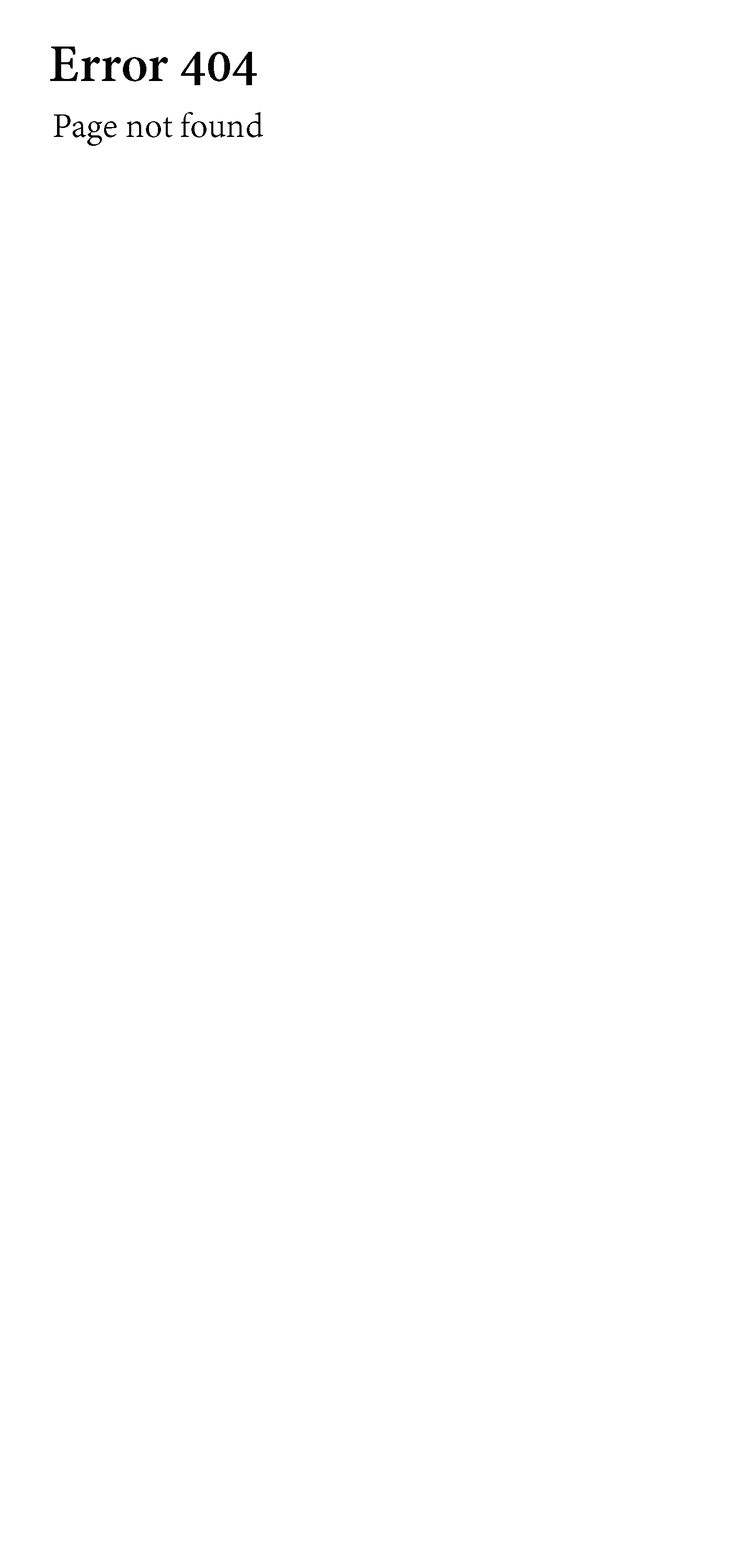
<style>
.page{position:relative;width:732px;height:1568px;background:#ffffff}
.page>*{position:absolute;margin:0}
.t1{font:57.5px "AdobeGurmukhi-Bold";color:#020202}
.t2{font:37.6px "AdobeGurmukhi-Regular";color:#020202}
</style>
<div class="page">
<p class="t1" style="left:50px;top:47px;width:207px;height:38px">Error 404</p>
<p class="t2" style="left:54px;top:112px;width:209px;height:34px">Page not found</p>
</div>
